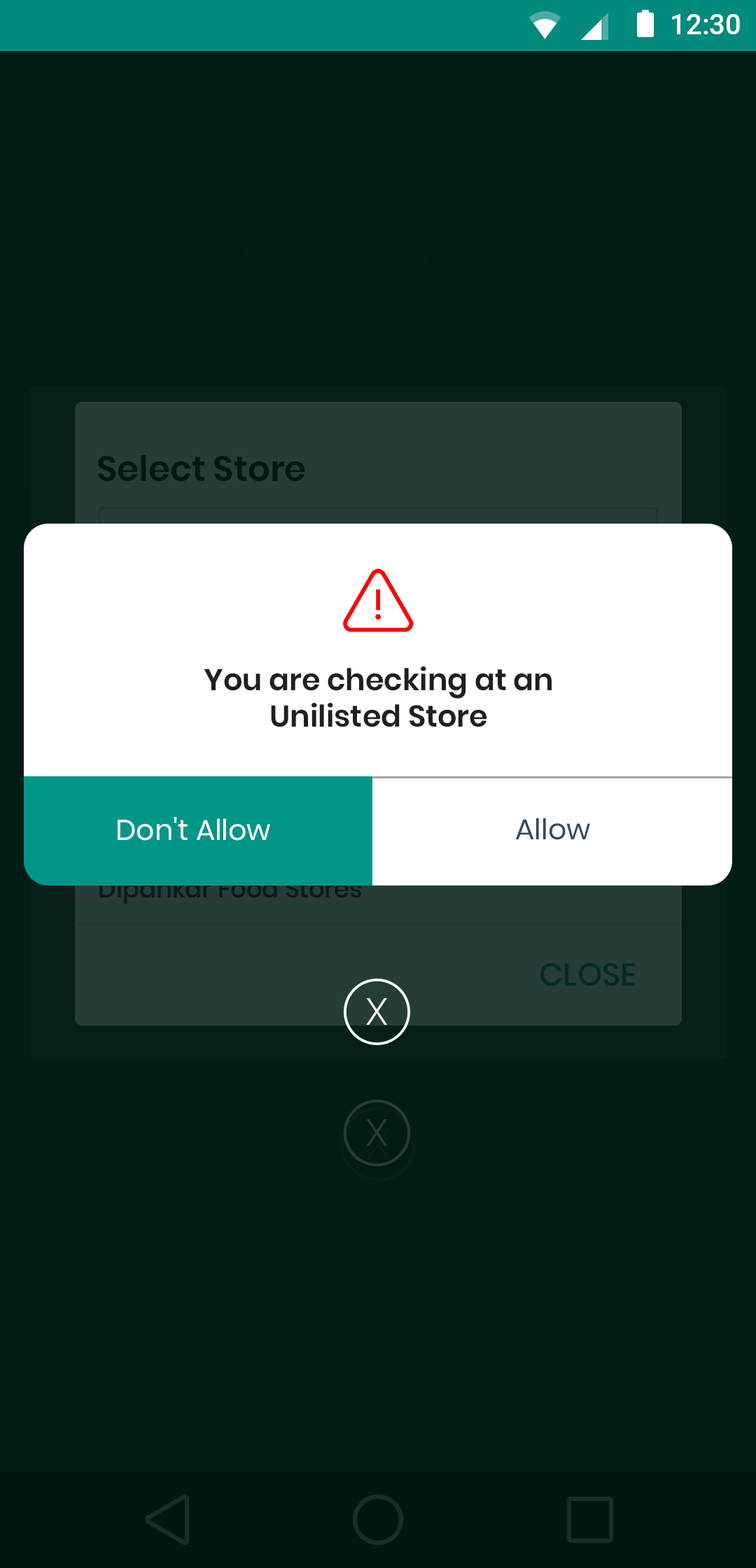
<style>
.page{position:relative;width:756px;height:1568px;background:#011b16}
.page>*{position:absolute;margin:0}
.t1{font:35px "Poppins-SemiBold";color:#0f0f0f}
.t2{font:30.1px "Poppins-SemiBold";color:#1f1f1f}
.t3{font:28.7px "Poppins-Regular";color:#ffffff}
.t4{font:28.7px "Poppins-Regular";color:#34495e}
.t5{font:24.8px "Poppins-Medium";color:#061c18}
.t6{font:31.5px "Poppins-Medium";color:#002c26;text-transform:uppercase}
.t7{font:37.4px "Roboto-Light";color:#ffffff}
.t8{font:37.4px "Roboto-Light";color:#263c38}
</style>
<div class="page">
<p class="t1" style="left:98px;top:455px;width:207px;height:27px">Select Store</p>
<p class="t2" style="left:204px;top:666px;width:348px;height:61px;text-align:center">You are checking at an<br>Unilisted Store</p>
<p class="t3" style="left:118px;top:817px;width:152px;height:24px">Don't Allow</p>
<p class="t4" style="left:515px;top:818px;width:75px;height:22px">Allow</p>
<p class="t5" style="left:99px;top:878px;width:262px;height:26px">Dipankar Food Stores</p>
<p class="t5" style="left:99px;top:878px;width:262px;height:26px">Dipankar Food Stores</p>
<p class="t6" style="left:540px;top:962px;width:96px;height:24px">Close</p>
<p class="t7" style="left:366px;top:998px;width:21px;height:27px">X</p>
<p class="t8" style="left:366px;top:1119px;width:21px;height:27px">X</p>
<p class="t8" style="left:366px;top:1119px;width:21px;height:27px">X</p>
</div>
